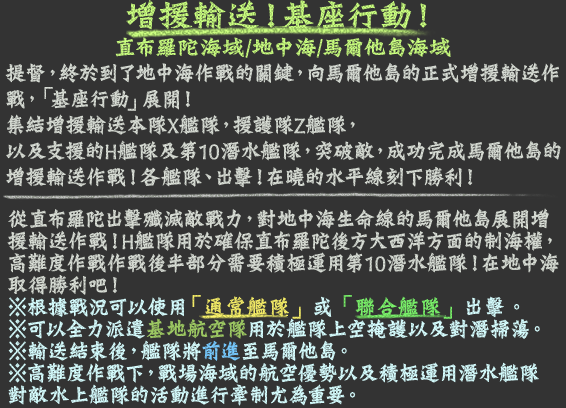
<style>
.page{position:relative;width:566px;height:408px;background:#333333}
.page>*{position:absolute;margin:0}
.t1{font:24px/38px "DFLungMen-W9-WINP-BF";color:#bbeb77}
.t2{font:36px/38px "DFLungMen-W9-WINP-BF";color:#bbeb77}
.t3{font:24px/26px "DFLungMen-W9-WINP-BF";color:#d9ded6;scale:0.9 1}
.t4{font:24px/22px "DFLungMen-W9-WINP-BF";color:#d9ded6;scale:0.9 1}
.t5{font:24px/22px "DFLungMen-W9-WINP-BF";color:#d7feff;scale:0.9 1}
.t6{font:24px/22px "DFLungMen-W9-WINP-BF";color:#f5ed68;scale:0.9 1}
.t7{font:24px/22px "DFLungMen-W9-WINP-BF";color:#7bf26b;scale:0.9 1}
.t8{font:24px/22px "DFLungMen-W9-WINP-BF";color:#a0cc65;scale:0.9 1}
.t9{font:24px/22px "DFLungMen-W9-WINP-BF";color:#78cbff;scale:0.9 1}
</style>
<div class="page">
<p class="t1" style="left:115px;top:0px;width:336px;height:58px;text-align:center"><span class="t2">增援輸送！基座行動！<br></span>直布羅陀海域/地中海/馬爾他島海域</p>
<p class="t3" style="left:5px;top:62px;width:556px;height:126px">提督，終於到了地中海作戰的關鍵，向馬爾他島的正式增援輸送作<br>戰，「基座行動」展開！<br>集結增援輸送本隊X艦隊，援護隊Z艦隊，<br>以及支援的H艦隊及第10潛水艦隊，突破敵，成功完成馬爾他島的<br>增援輸送作戰！各艦隊、出擊！在曉的水平線刻下勝利！</p>
<p class="t4" style="left:7px;top:208px;width:552px;height:198px">從直布羅陀出擊殲滅敵戰力，對地中海生命線的馬爾他島展開增<br>援輸送作戰！H艦隊用於確保直布羅陀後方大西洋方面的制海權，<br>高難度作戰作戰後半部分需要積極運用第10潛水艦隊！在地中海<br>取得勝利吧！<br><span class="t5">※根據戰況可以使用</span><span class="t6">「通常艦隊」</span><span class="t5">或</span><span class="t7">「聯合艦隊」</span><span class="t5">出擊。<br>※可以全力派遣</span><span class="t8">基地航空隊</span><span class="t5">用於艦隊上空掩護以及對潛掃蕩。<br>※輸送結束後，艦隊將</span><span class="t9">前進</span><span class="t5">至馬爾他島。<br>※高難度作戰下，戰場海域的航空優勢以及積極運用潛水艦隊<br>對敵水上艦隊的活動進行牽制尤為重要。</span></p>
</div>
